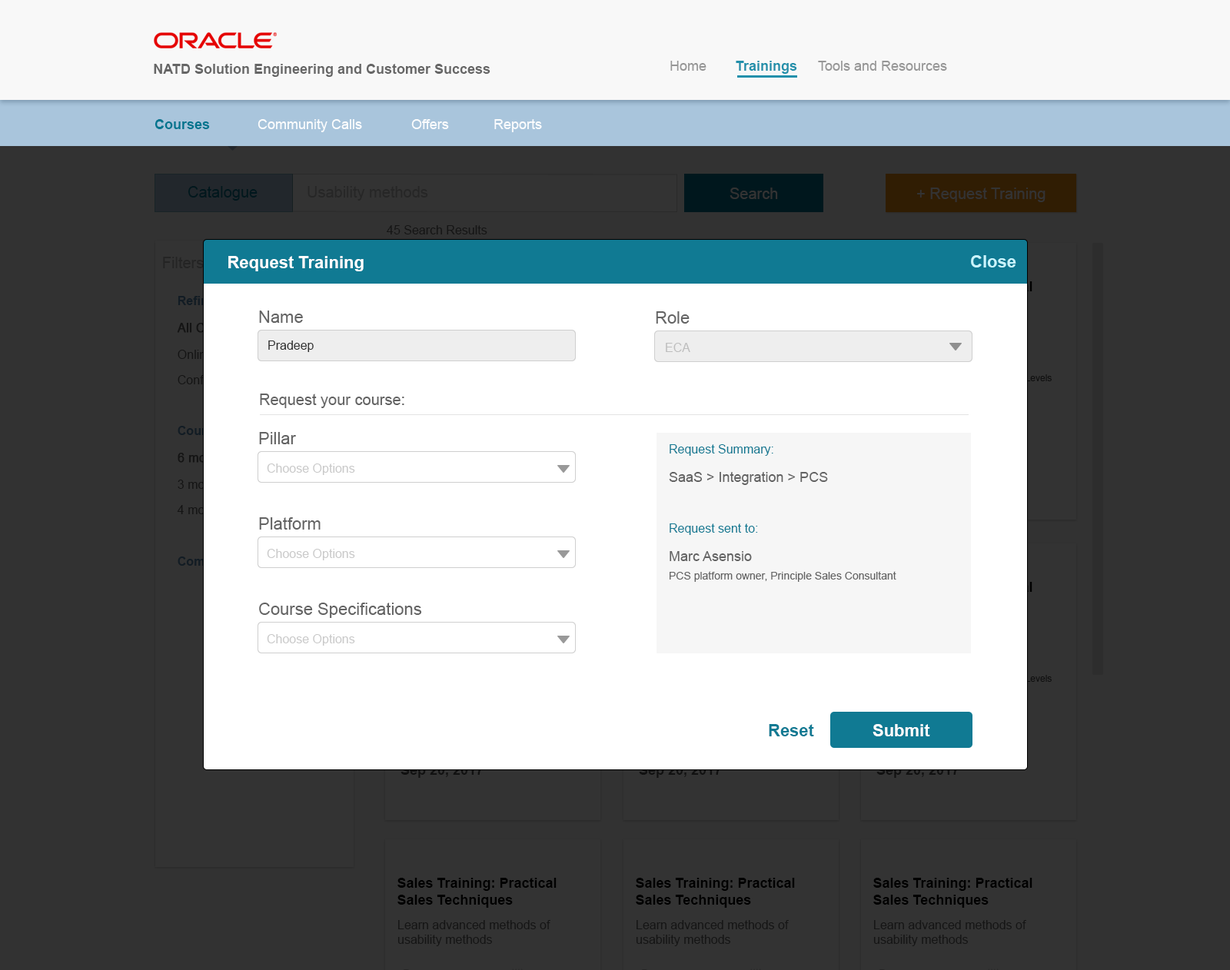
<style>
.page{position:relative;width:1230px;height:970px;background:#323232}
.page>*{position:absolute;margin:0}
.t1{font:13.8px "Arial-BoldMT";color:#666666}
.t2{font:13.8px "ArialMT";color:#969696}
.t3{font:13.8px "Arial-BoldMT";color:#2290ab}
.t4{font:13.8px "Arial-BoldMT";color:#00758f}
.t5{font:13.8px "ArialMT";color:#ffffff}
.t6{font:15.4px "ArialMT";color:#00171d}
.t7{font:15.4px "ArialMT";color:#323232}
.t8{font:15.4px "ArialMT";color:#333333}
.t9{font:12.3px "ArialMT";color:#151515}
.t10{font:15.4px "ArialMT";color:#242424}
.t11{font:16.9px "Arial-BoldMT";color:#ffffff}
.t12{font:16.9px "Arial-BoldMT";color:#c9f5ff}
.t13{font:16.9px "ArialMT";color:#636363}
.t14{font:12.3px "ArialMT";color:#2e2e2e}
.t15{font:12.3px "ArialMT";color:#bebebe}
.t16{font:15.4px "ArialMT";color:#636363}
.t17{font:12.3px "ArialMT";color:#107a93}
.t18{font:12.3px "ArialMT";color:#cacaca}
.t19{font:13.8px "ArialMT";color:#636363}
.t20{font:10.8px/18.4px "ArialMT";color:#636363}
.t21{font:13.8px/18.4px "ArialMT";color:#636363}
.t22{font:16.9px "Arial-BoldMT";color:#107a93}
.t23{font:13.8px "Arial-BoldMT";color:#000000}
</style>
<div class="page">
<p class="t1" style="left:154px;top:64px;width:336px;height:13px">NATD Solution Engineering and Customer Success</p>
<p class="t2" style="left:670px;top:61px;width:36px;height:10px">Home</p>
<p class="t3" style="left:735px;top:61px;width:62px;height:13px">Trainings</p>
<p class="t2" style="left:818px;top:61px;width:129px;height:10px">Tools and Resources</p>
<p class="t4" style="left:154px;top:119px;width:56px;height:10px">Courses</p>
<p class="t5" style="left:257px;top:119px;width:105px;height:13px;opacity:0.95">Community Calls</p>
<p class="t5" style="left:411px;top:119px;width:38px;height:10px;opacity:0.95">Offers</p>
<p class="t5" style="left:494px;top:119px;width:48px;height:13px;opacity:0.95">Reports</p>
<p class="t6" style="left:188px;top:186px;width:69px;height:15px">Catalogue</p>
<p class="t7" style="left:307px;top:186px;width:121px;height:15px;opacity:0.4">Usability methods</p>
<p class="t8" style="left:729px;top:188px;width:49px;height:11px">Search</p>
<p class="t8" style="left:917px;top:188px;width:128px;height:14px">+ Request Training</p>
<p class="t9" style="left:387px;top:225px;width:100px;height:9px">45 Search Results</p>
<p class="t10" style="left:163px;top:257px;width:41px;height:11px">Filters</p>
<p class="t11" style="left:228px;top:256px;width:135px;height:15px">Request Training</p>
<p class="t12" style="left:971px;top:255px;width:45px;height:12px">Close</p>
<p class="t13" style="left:259px;top:310px;width:44px;height:13px">Name</p>
<p class="t13" style="left:656px;top:311px;width:33px;height:13px">Role</p>
<p class="t14" style="left:268px;top:340px;width:46px;height:12px">Pradeep</p>
<p class="t15" style="left:665px;top:343px;width:25px;height:9px">ECA</p>
<p class="t16" style="left:260px;top:393px;width:144px;height:15px">Request your course:</p>
<p class="t13" style="left:259px;top:432px;width:37px;height:12px">Pillar</p>
<p class="t17" style="left:669px;top:444px;width:104px;height:12px">Request Summary:</p>
<p class="t18" style="left:267px;top:463px;width:88px;height:12px">Choose Options</p>
<p class="t19" style="left:669px;top:472px;width:159px;height:13px">SaaS &gt; Integration &gt; PCS</p>
<p class="t13" style="left:259px;top:517px;width:61px;height:12px">Platform</p>
<p class="t17" style="left:669px;top:523px;width:89px;height:12px">Request sent to:</p>
<p class="t18" style="left:267px;top:549px;width:88px;height:11px">Choose Options</p>
<p class="t20" style="left:669px;top:551px;width:227px;height:31px"><span class="t21">Marc Asensio<br></span>PCS platform owner, Principle Sales Consultant</p>
<p class="t13" style="left:259px;top:602px;width:163px;height:16px">Course Specifications</p>
<p class="t18" style="left:267px;top:634px;width:88px;height:12px">Choose Options</p>
<p class="t22" style="left:768px;top:724px;width:46px;height:12px">Reset</p>
<p class="t11" style="left:872px;top:724px;width:58px;height:12px">Submit</p>
<p class="t23" style="left:397px;top:878px;width:159px;height:30px">Sales Training: Practical Sales Techniques</p>
<p class="t23" style="left:636px;top:878px;width:159px;height:30px">Sales Training: Practical Sales Techniques</p>
<p class="t23" style="left:873px;top:878px;width:159px;height:30px">Sales Training: Practical Sales Techniques</p>
<p class="t9" style="left:397px;top:920px;width:153px;height:26px">Learn advanced methods of<br>usability methods</p>
<p class="t9" style="left:636px;top:920px;width:152px;height:26px">Learn advanced methods of<br>usability methods</p>
<p class="t9" style="left:873px;top:920px;width:153px;height:26px">Learn advanced methods of<br>usability methods</p>
</div>
